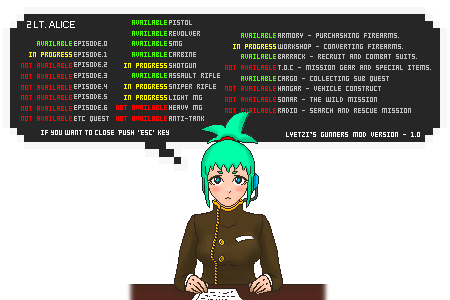
<style>
.page{position:relative;width:450px;height:300px;background:#ffffff}
.page>*{position:absolute;margin:0}
.t1{font:8px/10.7px "Small-5x3";color:#bebebe}
.t2{font:8px "Small-5x3";color:#ffffff}
</style>
<div class="page">
<p class="t1" style="left:169px;top:20px;width:51px;height:101px">PISTOL<br>REVOLVER<br>SMG<br>CARBINE<br>SHOTGUN<br>ASSAULT RIFLE<br>SNIPER RIFLE<br>LIGHT MG<br>HEAVY MG<br>ANTI-TANK</p>
<p class="t1" style="left:74px;top:41px;width:35px;height:81px">EPISODE.0<br>EPISODE.1<br>EPISODE.2<br>EPISODE.3<br>EPISODE.4<br>EPISODE.5<br>EPISODE.6<br>ETC QUEST</p>
<p class="t1" style="left:278px;top:33px;width:153px;height:80px">ARMORY - PURCHASHING FIREARMS.<br>WORKSHOP - CONVERTING FIREARMS.<br>BARRACK - RECRUIT AND COMBAT SUITS.<br>T.O.C - MISSION GEAR AND SPECIAL ITEMS.<br>CARGO - COLLECTING SUB QUEST<br>HANGAR - VEHICLE CONSTRUCT<br>SONAR - THE WILD MISSION<br>RADIO - SEARCH AND RESCUE MISSION</p>
<p class="t2" style="left:286px;top:132px;width:134px;height:5px">LYETZI’S GUNNERS MOD VERSION - 1.0</p>
</div>
